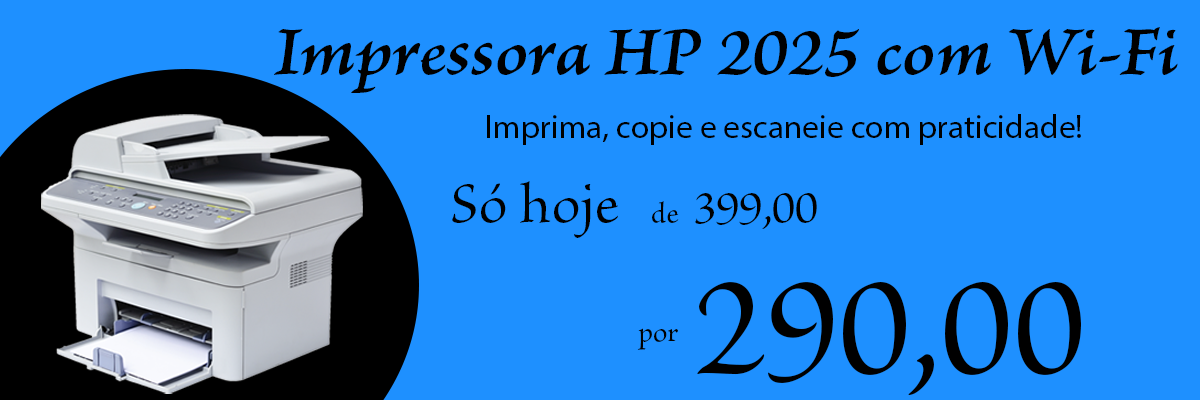
<style>
.page{position:relative;width:1200px;height:400px;background:#1e90ff}
.page>*{position:absolute;margin:0}
.t1{font:72.6px "BriosoPro-SemiboldItCapt";color:#000000}
.t2{font:33.2px "MyriadPro-Regular";color:#000000}
.t3{font:60px "BriosoPro-Regular";color:#000000}
.t4{font:48px "BriosoPro-Regular";color:#000000}
.t5{font:30px "BriosoPro-Regular";color:#000000}
.t6{font:150px "BriosoPro-Regular";color:#000000}
</style>
<div class="page">
<p class="t1" style="left:274px;top:27px;width:904px;height:66px">Impressora HP 2025 com Wi-Fi</p>
<p class="t2" style="left:487px;top:114px;width:594px;height:31px">Imprima, copie e escaneie com praticidade!</p>
<p class="t3" style="left:452px;top:181px;width:166px;height:57px">Só hoje</p>
<p class="t4" style="left:695px;top:193px;width:122px;height:36px">399,00</p>
<p class="t5" style="left:652px;top:201px;width:27px;height:22px">de</p>
<p class="t6" style="left:697px;top:282px;width:384px;height:113px">290,00</p>
<p class="t5" style="left:637px;top:328px;width:41px;height:22px">por</p>
</div>
